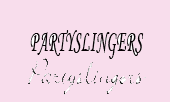
<style>
.page{position:relative;width:170px;height:102px;background:#f8ddec}
.page>*{position:absolute;margin:0}
.t1{font:31px "MonotypeCorsiva";letter-spacing:0.004em;color:#080004;scale:0.5 1}
</style>
<div class="page">
<p class="t1" style="left:30px;top:30px;width:114px;height:29px">PARTYSLINGERS</p>
</div>
